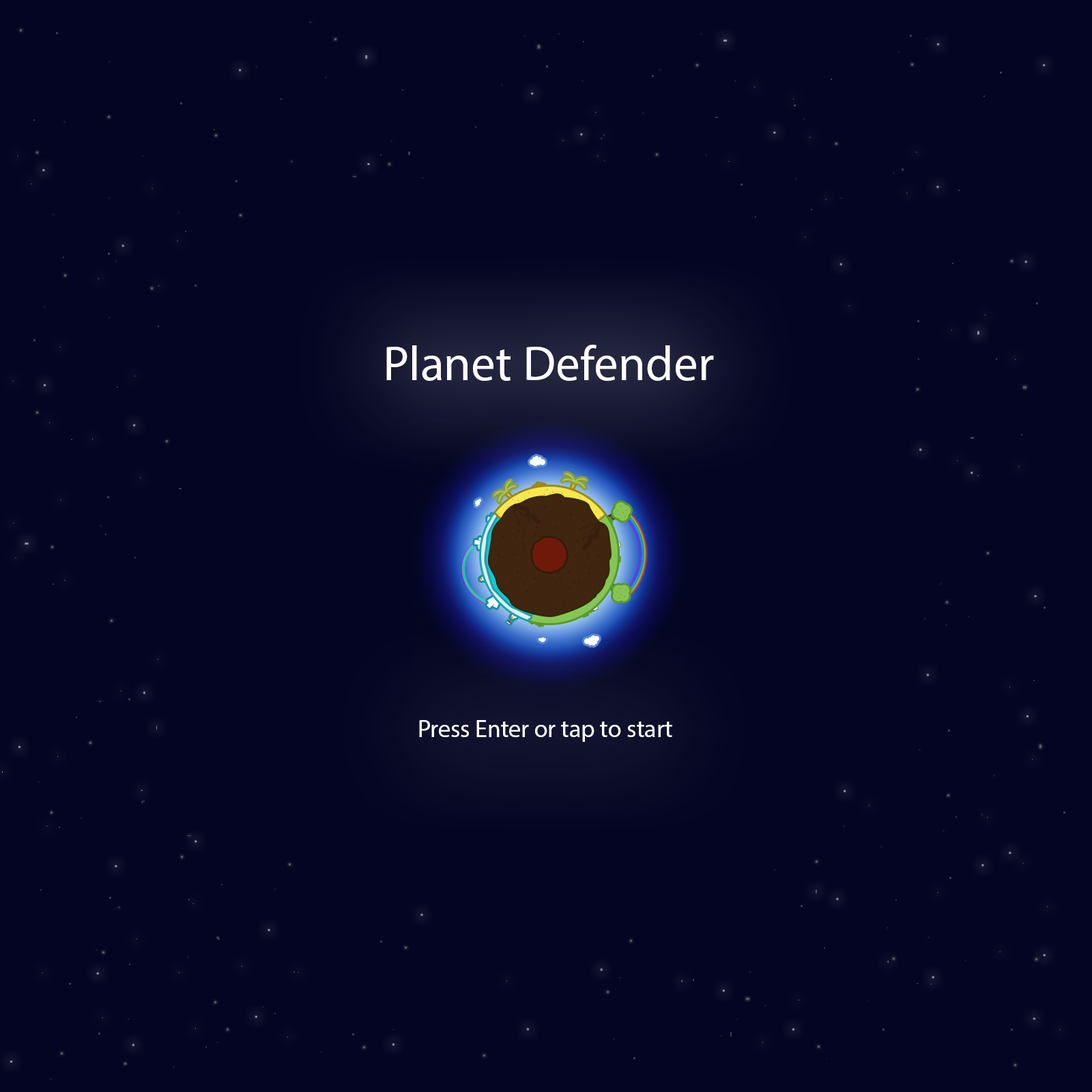
<style>
.page{position:relative;width:1092px;height:1092px;background:#030522}
.page>*{position:absolute;margin:0}
.t1{font:49.1px "MyriadPro-Regular";color:#ffffff}
.t2{font:24.6px "MyriadPro-Regular";color:#ffffff}
</style>
<div class="page">
<p class="t1" style="left:386px;top:345px;width:328px;height:36px">Planet Defender</p>
<p class="t2" style="left:419px;top:720px;width:253px;height:22px">Press Enter or tap to start</p>
</div>
